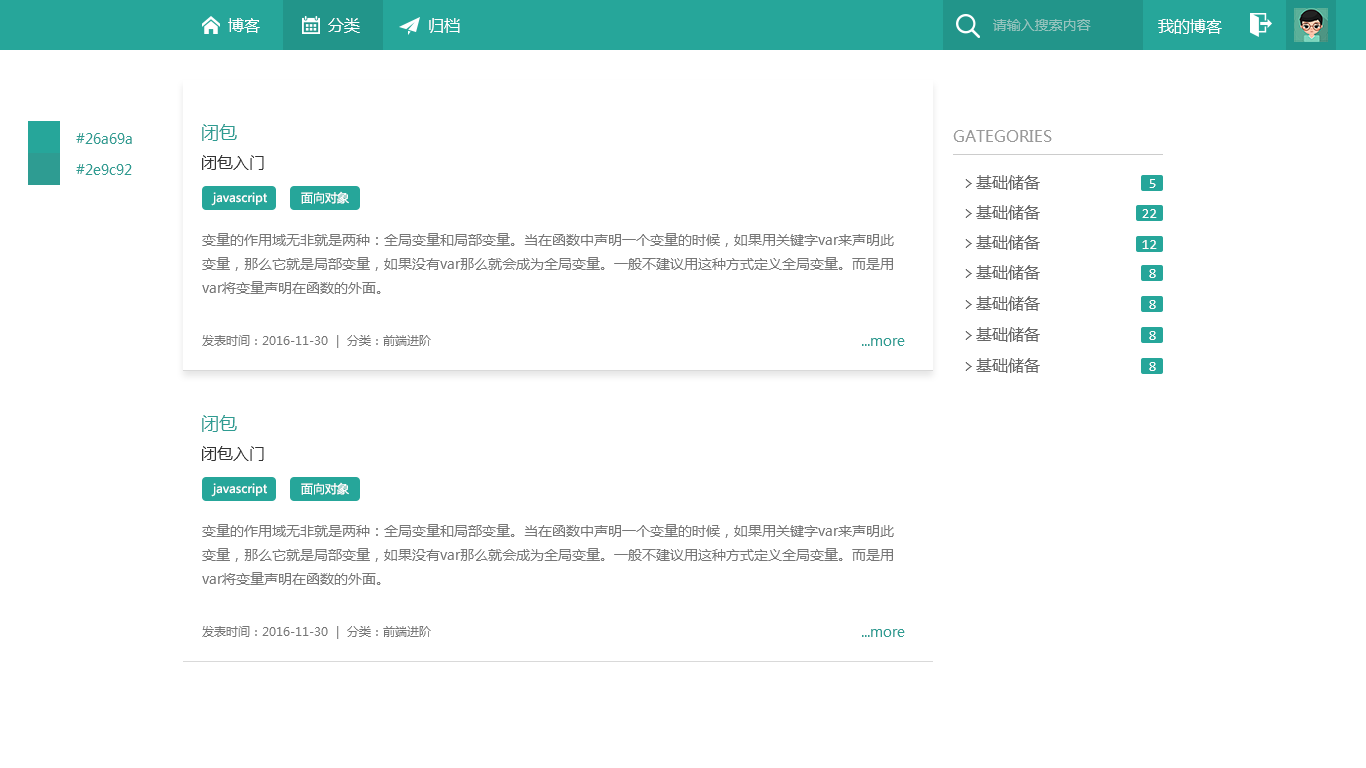
<style>
.page{position:relative;width:1366px;height:768px;background:#ffffff}
.page>*{position:absolute;margin:0}
.t1{font:16px "MicrosoftYaHei";color:#ffffff}
.t2{font:14px "MicrosoftYaHei";color:#95c4be}
.t3{font:18px "MicrosoftYaHei";color:#2e9c92}
.t4{font:14px "MicrosoftYaHei";color:#2e9c92}
.t5{font:16px "MicrosoftYaHei";color:#999999}
.t6{font:16px "MicrosoftYaHei";color:#333333}
.t7{font:16px "MicrosoftYaHei";color:#666666}
.t8{font:16px "Consolas";color:#666666}
.t9{font:14px "Consolas";color:#fefefe}
.t10{font:12px "MicrosoftYaHei";color:#fefefe}
.t11{font:14px/24px "MicrosoftYaHei";color:#777777}
.t12{font:12px "MicrosoftYaHei";color:#777777}
</style>
<div class="page">
<p class="t1" style="left:228px;top:18px;width:32px;height:15px">博客</p>
<p class="t1" style="left:328px;top:18px;width:32px;height:15px">分类</p>
<p class="t1" style="left:429px;top:18px;width:31px;height:15px">归档</p>
<p class="t2" style="left:993px;top:19px;width:98px;height:12px">请输入搜索内容</p>
<p class="t1" style="left:1158px;top:19px;width:64px;height:15px">我的博客</p>
<p class="t3" style="left:202px;top:124px;width:35px;height:17px">闭包</p>
<p class="t4" style="left:76px;top:133px;width:56px;height:11px">#26a69a</p>
<p class="t5" style="left:953px;top:130px;width:99px;height:12px">GATEGORIES</p>
<p class="t6" style="left:202px;top:155px;width:62px;height:15px">闭包入门</p>
<p class="t4" style="left:76px;top:164px;width:56px;height:11px">#2e9c92</p>
<p class="t7" style="left:965px;top:175px;width:75px;height:15px"><span class="t8">&gt; </span>基础储备</p>
<p class="t9" style="left:1149px;top:179px;width:7px;height:9px">5</p>
<p class="t10" style="left:211px;top:192px;width:56px;height:14px">javascript</p>
<p class="t10" style="left:301px;top:191px;width:48px;height:13px">面向对象</p>
<p class="t7" style="left:965px;top:205px;width:75px;height:15px"><span class="t8">&gt; </span>基础储备</p>
<p class="t9" style="left:1142px;top:209px;width:15px;height:9px">22</p>
<p class="t11" style="left:202px;top:233px;width:692px;height:61px">变量的作用域无非就是两种：全局变量和局部变量。当在函数中声明一个变量的时候，如果用关键字var来声明此变量，那么它就是局部变量，如果没有var那么就会成为全局变量。一般不建议用这种方式定义全局变量。而是用var将变量声明在函数的外面。</p>
<p class="t7" style="left:965px;top:235px;width:75px;height:15px"><span class="t8">&gt; </span>基础储备</p>
<p class="t9" style="left:1142px;top:240px;width:15px;height:9px">12</p>
<p class="t7" style="left:965px;top:265px;width:75px;height:15px"><span class="t8">&gt; </span>基础储备</p>
<p class="t9" style="left:1149px;top:269px;width:7px;height:9px">8</p>
<p class="t7" style="left:965px;top:296px;width:75px;height:15px"><span class="t8">&gt; </span>基础储备</p>
<p class="t9" style="left:1149px;top:300px;width:7px;height:9px">8</p>
<p class="t7" style="left:965px;top:327px;width:75px;height:15px"><span class="t8">&gt; </span>基础储备</p>
<p class="t12" style="left:202px;top:335px;width:229px;height:13px">发表时间：2016-11-30  |  分类：前端进阶</p>
<p class="t4" style="left:862px;top:338px;width:43px;height:8px">...more</p>
<p class="t9" style="left:1149px;top:331px;width:7px;height:9px">8</p>
<p class="t7" style="left:965px;top:358px;width:75px;height:15px"><span class="t8">&gt; </span>基础储备</p>
<p class="t9" style="left:1149px;top:362px;width:7px;height:9px">8</p>
<p class="t3" style="left:202px;top:415px;width:35px;height:17px">闭包</p>
<p class="t6" style="left:202px;top:446px;width:62px;height:15px">闭包入门</p>
<p class="t10" style="left:211px;top:483px;width:56px;height:14px">javascript</p>
<p class="t10" style="left:301px;top:482px;width:48px;height:13px">面向对象</p>
<p class="t11" style="left:202px;top:524px;width:692px;height:61px">变量的作用域无非就是两种：全局变量和局部变量。当在函数中声明一个变量的时候，如果用关键字var来声明此变量，那么它就是局部变量，如果没有var那么就会成为全局变量。一般不建议用这种方式定义全局变量。而是用var将变量声明在函数的外面。</p>
<p class="t12" style="left:202px;top:626px;width:229px;height:13px">发表时间：2016-11-30  |  分类：前端进阶</p>
<p class="t4" style="left:862px;top:629px;width:43px;height:8px">...more</p>
</div>
